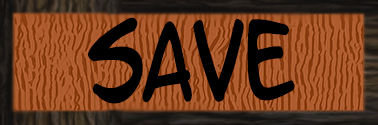
<style>
.page{position:relative;width:378px;height:125px}
.page>*{position:absolute;margin:0}
.t1{font:93.6px "LetterOMatic";color:#000000;scale:0.76 1}
</style>
<div class="page">
<p class="t1" style="left:88px;top:17px;width:207px;height:87px">Save</p>
</div>
